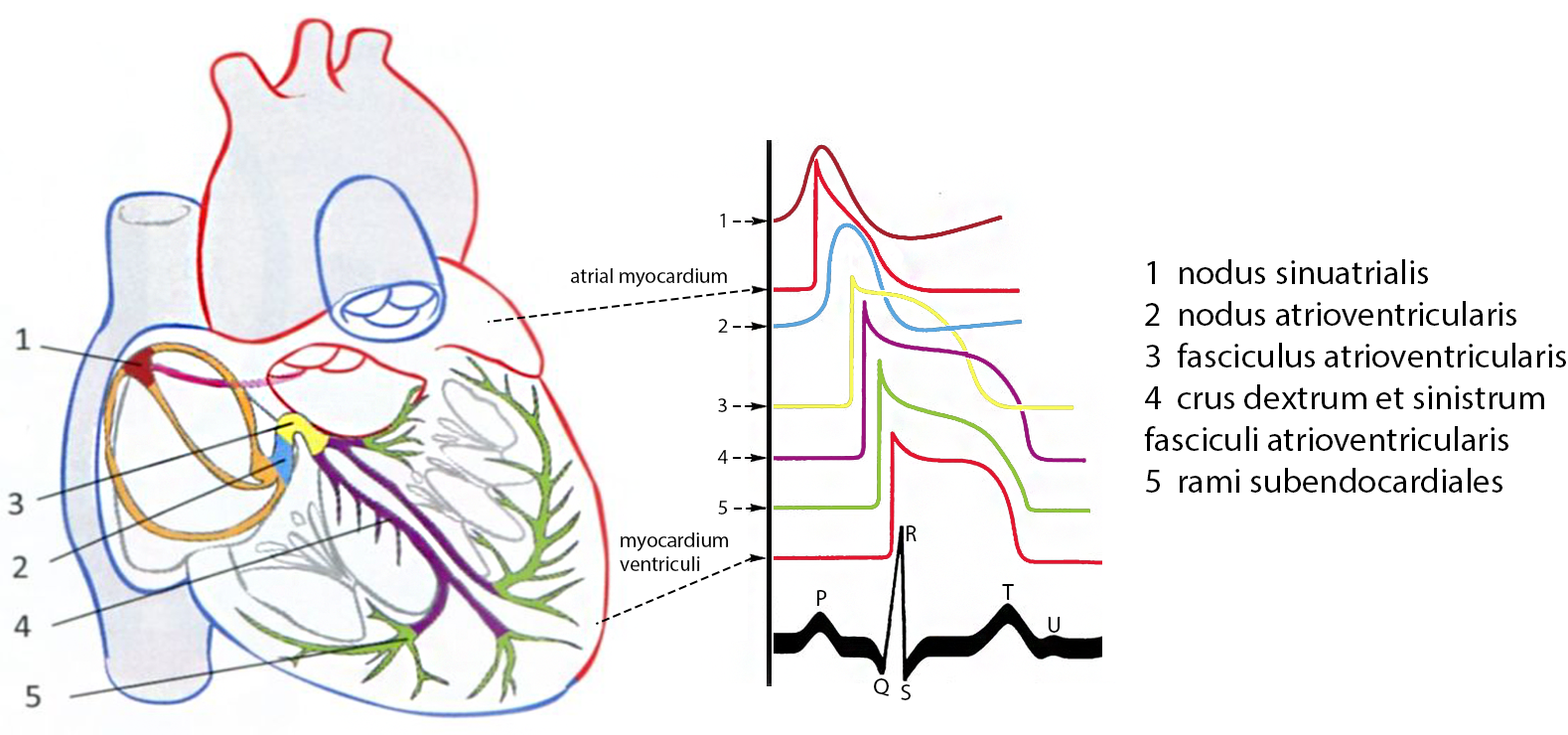
<style>
.page{position:relative;width:1568px;height:735px;background:#ffffff}
.page>*{position:absolute;margin:0}
.t1{font:20.9px "MyriadPro-Regular";color:#000000}
.t2{font:34.8px/41.7px "MyriadPro-Regular";color:#000000}
.t3{font:20.9px/23.2px "MyriadPro-Regular";color:#000000}
.t4{font:23.2px "MyriadPro-Regular";color:#000000}
</style>
<div class="page">
<p class="t1" style="left:720px;top:214px;width:5px;height:13px">1</p>
<p class="t1" style="left:570px;top:268px;width:157px;height:19px">atrial myocardium</p>
<p class="t2" style="left:1144px;top:259px;width:422px;height:234px">1  nodus sinuatrialis<br>2  nodus atrioventricularis<br>3  fasciculus atrioventricularis<br>4  crus dextrum et sinistrum <br>fasciculi atrioventricularis<br>5  rami subendocardiales</p>
<p class="t1" style="left:718px;top:319px;width:10px;height:14px">2</p>
<p class="t1" style="left:718px;top:398px;width:9px;height:14px">3</p>
<p class="t1" style="left:717px;top:450px;width:11px;height:14px">4</p>
<p class="t1" style="left:718px;top:500px;width:10px;height:14px">5</p>
<p class="t3" style="left:620px;top:532px;width:109px;height:39px">myocardium <br>ventriculi</p>
<p class="t4" style="left:906px;top:525px;width:11px;height:16px">R</p>
<p class="t4" style="left:816px;top:590px;width:11px;height:16px">P</p>
<p class="t4" style="left:1002px;top:584px;width:12px;height:16px">T</p>
<p class="t4" style="left:1048px;top:617px;width:13px;height:16px">U</p>
<p class="t4" style="left:874px;top:678px;width:15px;height:18px">Q</p>
<p class="t4" style="left:901px;top:684px;width:10px;height:16px">S</p>
</div>
